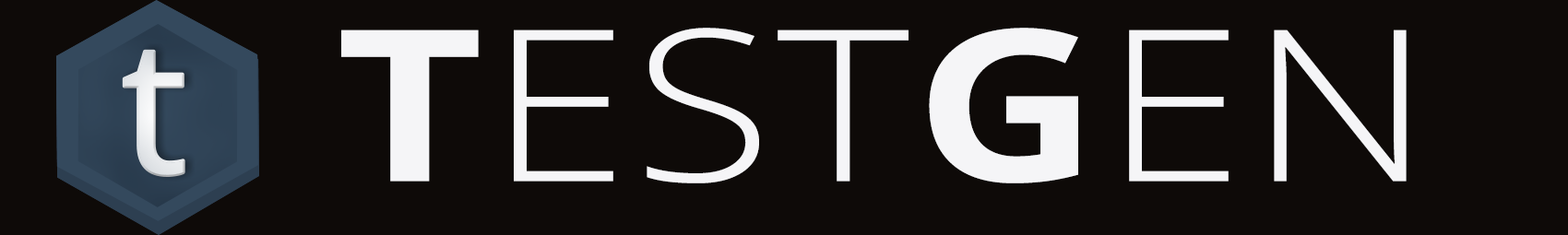
<style>
.page{position:relative;width:1568px;height:235px;background:#0e0a08}
.page>*{position:absolute;margin:0}
.t1{font:211.5px "OpenSans-Light";letter-spacing:0.02em;color:#f5f5f7;scale:1.2 1}
.t2{font:211.5px "OpenSans-Bold";letter-spacing:0.02em;color:#f5f5f7;scale:1.2 1}
</style>
<div class="page">
<p class="t1" style="left:341px;top:28px;width:1066px;height:156px"><span class="t2">T</span>EST<span class="t2">G</span>EN</p>
</div>
